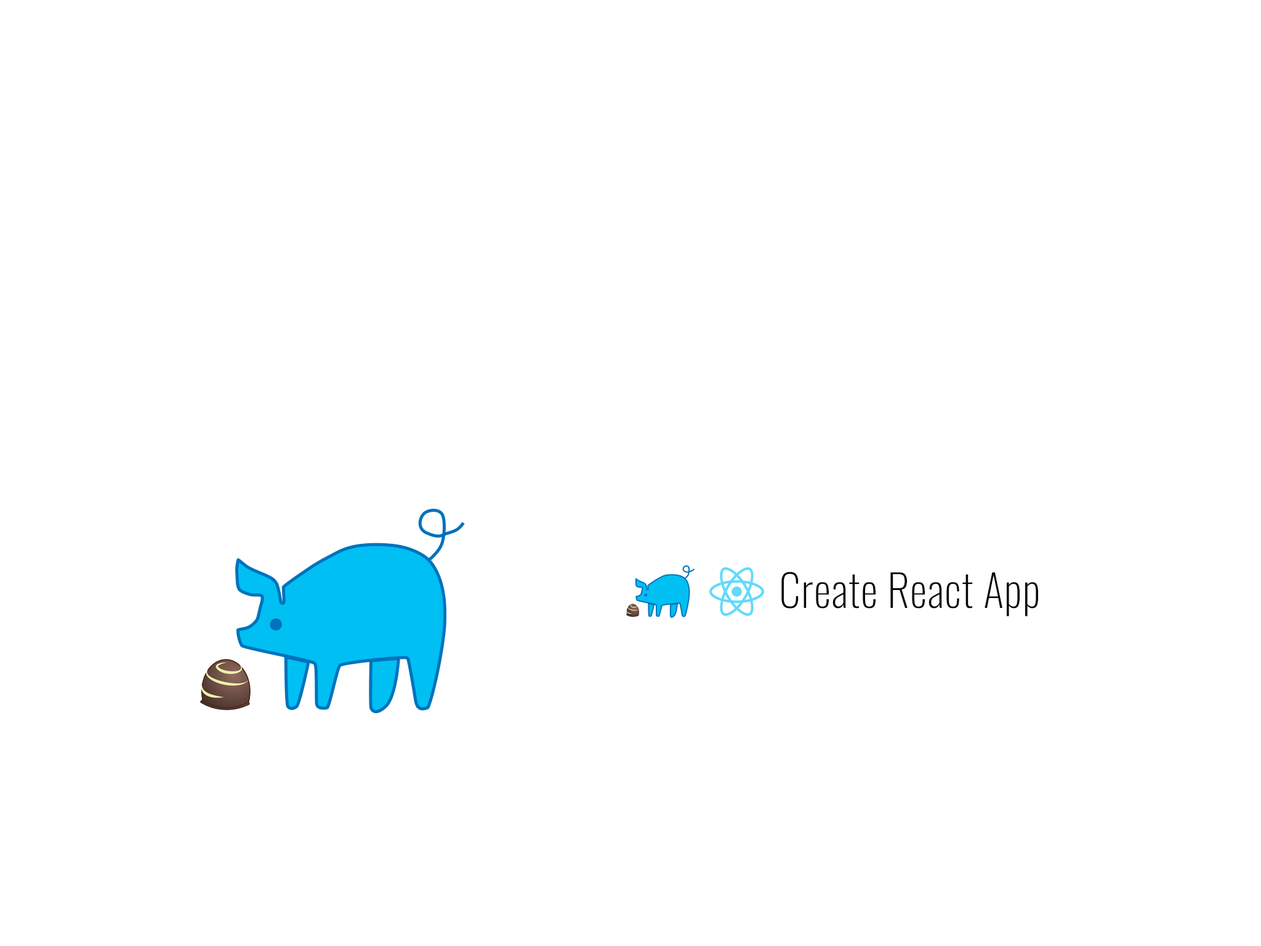
<style>
.page{position:relative;width:1261px;height:946px;background:#ffffff}
.page>*{position:absolute;margin:0}
.t1{font:43.9px "Oswald-ExtraLight";letter-spacing:0.016em;color:#050505}
</style>
<div class="page">
<p class="t1" style="left:781px;top:571px;width:257px;height:45px">Create React App</p>
</div>
